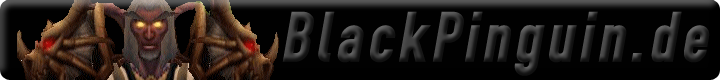
<style>
.page{position:relative;width:720px;height:80px;background:#010101}
.page>*{position:absolute;margin:0}
.t1{font:72px "DIN-1451-Engschrift-Regular";letter-spacing:0.05em;font-weight:bold;font-style:italic}
</style>
<div class="page">
<p class="t1" style="left:282px;top:11px;width:428px;height:65px">BlackPinguin.de</p>
</div>
